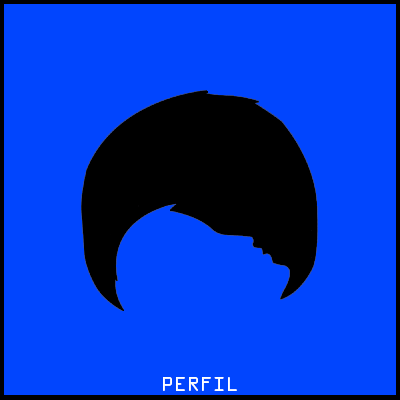
<style>
.page{position:relative;width:400px;height:400px;background:#0145fe}
.page>*{position:absolute;margin:0}
.t1{font:18px "OCRAStd";color:#ffffff}
</style>
<div class="page">
<p class="t1" style="left:163px;top:377px;width:74px;height:14px">PERFIL</p>
</div>
